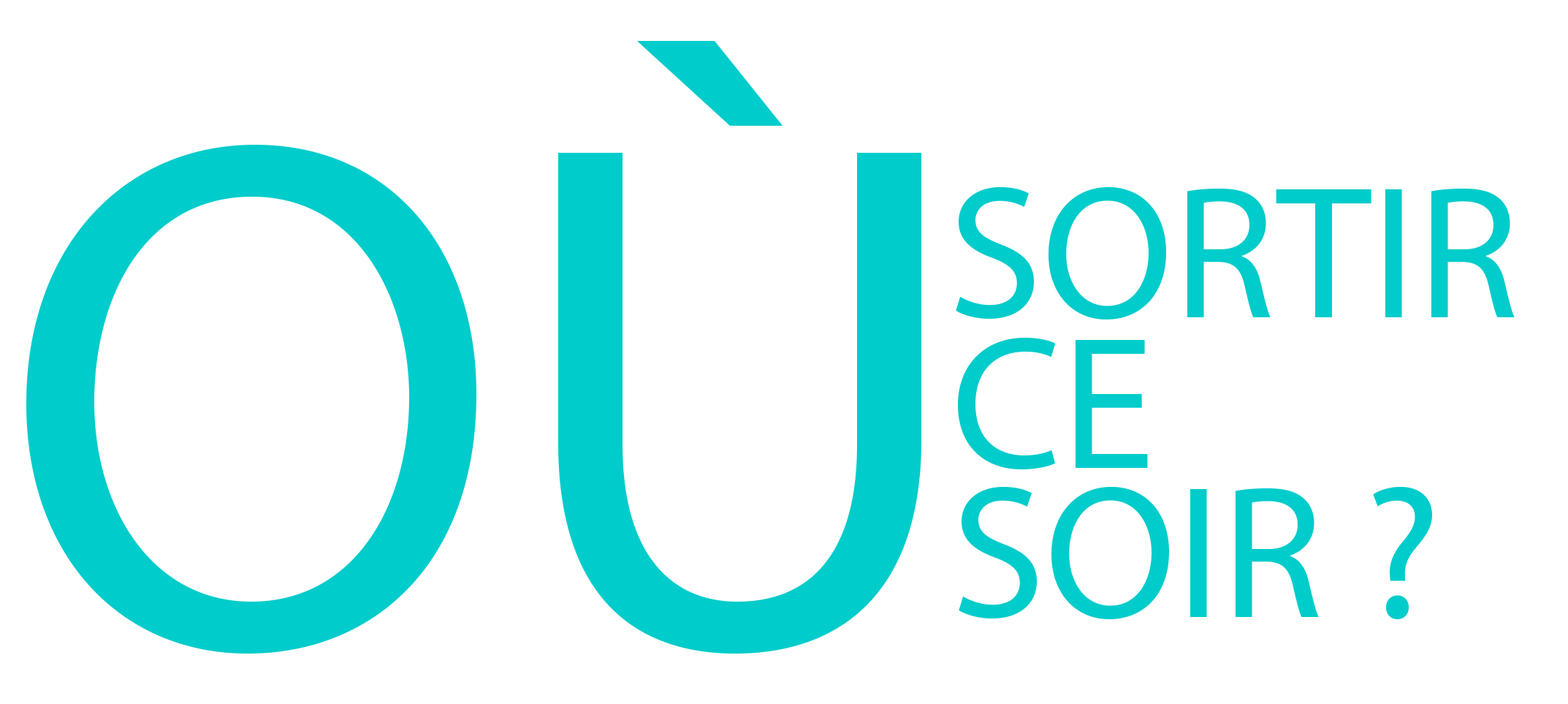
<style>
.page{position:relative;width:1568px;height:704px;background:#ffffff}
.page>*{position:absolute;margin:0}
.t1{font:730.7px "MyriadPro-Regular";color:#00cccb;text-transform:uppercase}
.t2{font:190px "MyriadPro-Regular";color:#00cccb;text-transform:uppercase}
</style>
<div class="page">
<p class="t1" style="left:26px;top:41px;width:895px;height:612px">où</p>
<p class="t2" style="left:956px;top:186px;width:559px;height:133px">Sortir</p>
<p class="t2" style="left:958px;top:338px;width:190px;height:131px">CE</p>
<p class="t2" style="left:959px;top:486px;width:473px;height:133px">SOIR ?</p>
</div>
